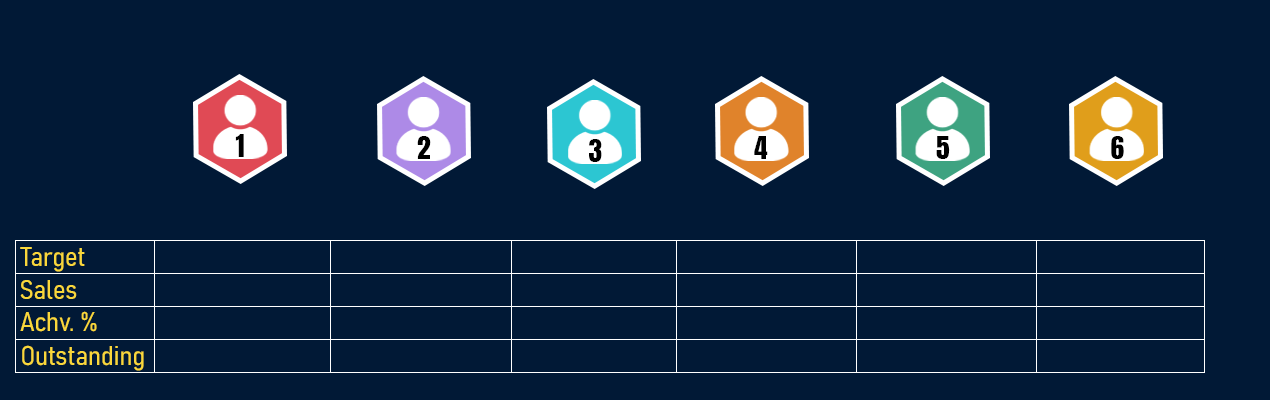
<style>
.page{position:relative;width:1270px;height:400px;background:#011936}
.page>*{position:absolute;margin:0}
.t1{font:27.4px "Anton-Regular";color:#000000}
.t2{font:26.7px "Bahnschrift-SemiLightSemiCondensed";color:#f9d73b}
</style>
<div class="page">
<p class="t1" style="left:235px;top:134px;width:9px;height:23px">1</p>
<p class="t1" style="left:417px;top:136px;width:14px;height:23px">2</p>
<p class="t1" style="left:754px;top:136px;width:14px;height:23px">4</p>
<p class="t1" style="left:936px;top:136px;width:14px;height:23px">5</p>
<p class="t1" style="left:1111px;top:136px;width:13px;height:23px">6</p>
<p class="t1" style="left:589px;top:139px;width:13px;height:23px">3</p>
<p class="t2" style="left:20px;top:247px;width:65px;height:25px">Target</p>
<p class="t2" style="left:20px;top:280px;width:57px;height:19px">Sales</p>
<p class="t2" style="left:20px;top:311px;width:77px;height:21px">Achv. %</p>
<p class="t2" style="left:22px;top:345px;width:122px;height:26px">Outstanding</p>
</div>
